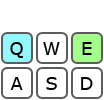
<style>
.page{position:relative;width:104px;height:100px;background:#ffffff}
.page>*{position:absolute;margin:0}
.t1{font:18px "Verdana";color:#000000}
</style>
<div class="page">
<p class="t1" style="left:10px;top:42px;width:13px;height:16px">Q</p>
<p class="t1" style="left:43px;top:42px;width:17px;height:13px">W</p>
<p class="t1" style="left:82px;top:42px;width:10px;height:13px">E</p>
<p class="t1" style="left:10px;top:77px;width:13px;height:13px">A</p>
<p class="t1" style="left:46px;top:77px;width:11px;height:13px">S</p>
<p class="t1" style="left:81px;top:77px;width:12px;height:13px">D</p>
</div>
